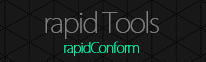
<style>
.page{position:relative;width:206px;height:62px;background:#181818}
.page>*{position:absolute;margin:0}
.t1{font:28px "KozGoPr6N-ExtraLight";letter-spacing:-0.06em;color:#7f7f7f}
.t2{font:14px "KozGoPr6N-ExtraLight";letter-spacing:-0.06em;color:#02f0a4}
</style>
<div class="page">
<p class="t1" style="left:45px;top:11px;width:114px;height:28px">rapid Tools</p>
<p class="t2" style="left:64px;top:41px;width:75px;height:15px">rapidConform</p>
</div>
